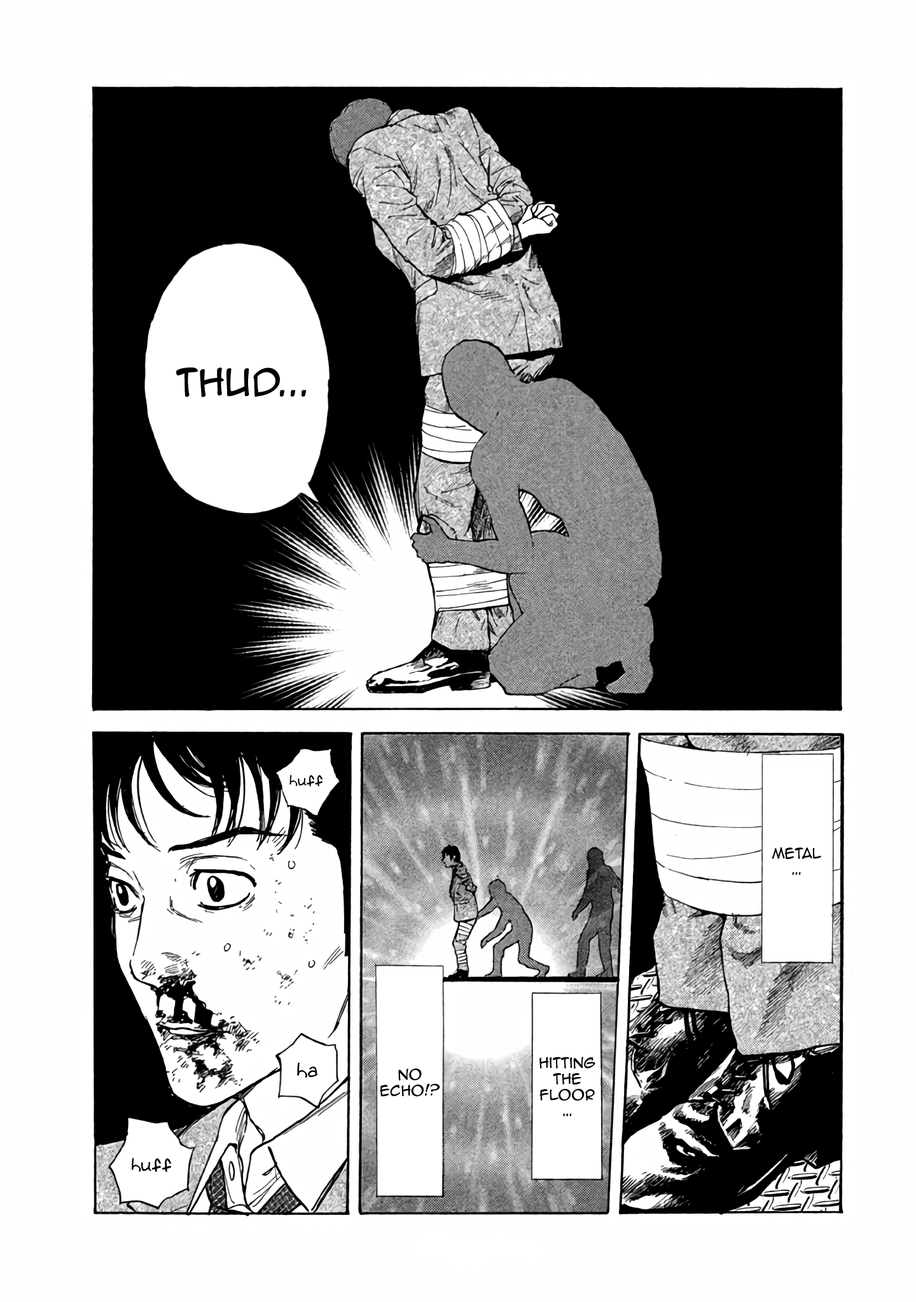
<style>
.page{position:relative;width:916px;height:1302px;background:#000000}
.page>*{position:absolute;margin:0}
.t1{font:35px "AnimeAce2.0BB";color:#000000}
.t2{font:15.3px "Augie";color:#000000}
.t3{font:13.4px "AnimeAce2.0BB";color:#000000}
.t4{font:20.3px "Augie";color:#000000}
.t5{font:18.4px "Augie";color:#000000}
</style>
<div class="page">
<p class="t1" style="left:176px;top:368px;width:130px;height:29px">Thud...</p>
<p class="t2" style="left:289px;top:774px;width:33px;height:13px">huff</p>
<p class="t3" style="left:771px;top:847px;width:50px;height:28px;text-align:center">Metal …</p>
<p class="t3" style="left:539px;top:1057px;width:56px;height:60px;text-align:center">Hitting the floor…</p>
<p class="t4" style="left:297px;top:1063px;width:20px;height:15px">ha</p>
<p class="t3" style="left:380px;top:1068px;width:60px;height:29px;text-align:center">No echo!?</p>
<p class="t5" style="left:132px;top:1158px;width:39px;height:15px">huff</p>
</div>
